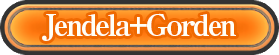
<style>
.page{position:relative;width:279px;height:55px}
.page>*{position:absolute;margin:0}
.t1{font:30px "RyuminPro-ExBold";letter-spacing:-0.08em;color:#fffff7}
</style>
<div class="page">
<p class="t1" style="left:42px;top:13px;width:194px;height:28px">Jendela+Gorden</p>
</div>
